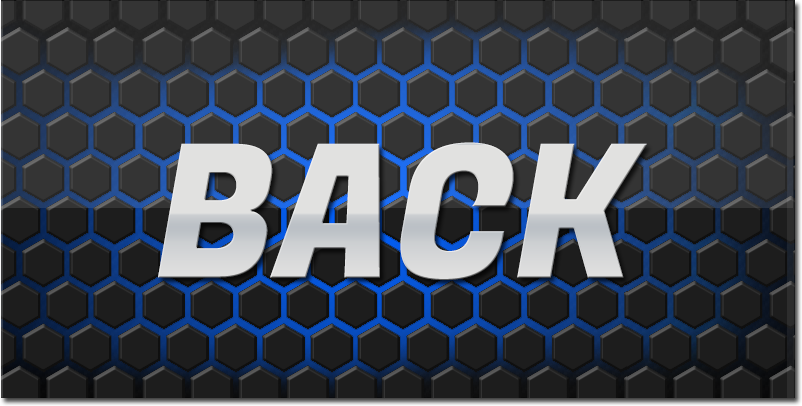
<style>
.page{position:relative;width:802px;height:406px;background:#343434}
.page>*{position:absolute;margin:0}
.t1{font:185.2px "FugazOne-Regular";color:#dfdfdf}
</style>
<div class="page">
<p class="t1" style="left:158px;top:142px;width:489px;height:138px">BACK</p>
</div>
